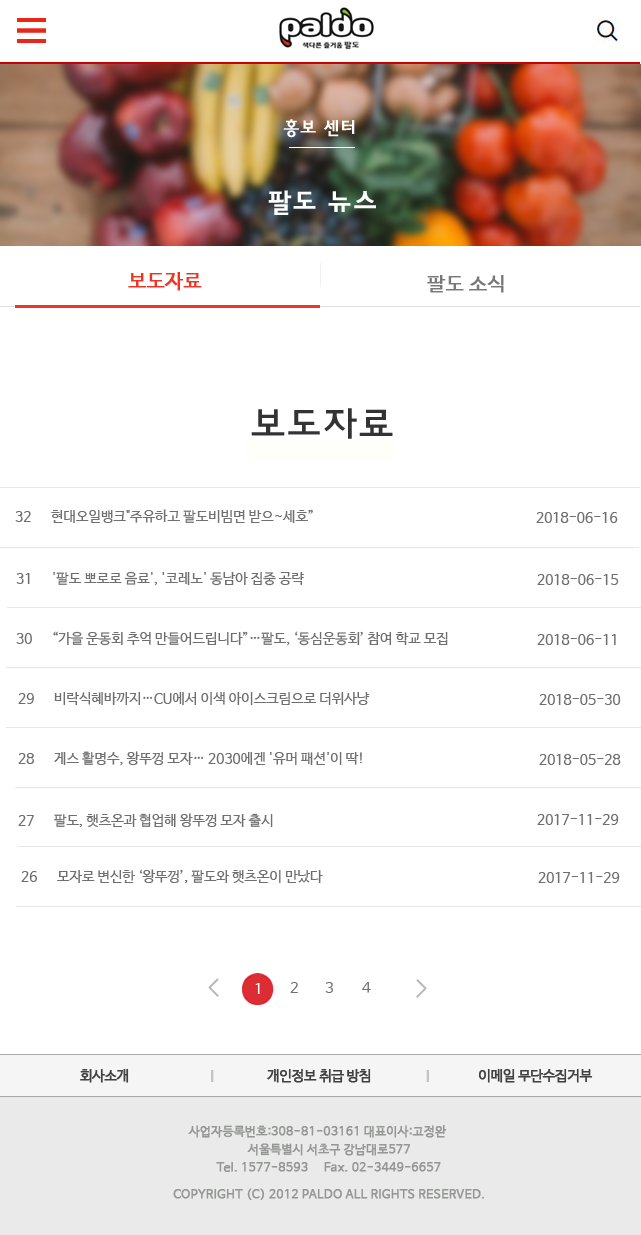
<style>
.page{position:relative;width:641px;height:1235px;background:#ffffff}
.page>*{position:absolute;margin:0}
.t1{font:18px "HaanYGodic23";color:#ffffff;font-weight:bold}
.t2{font:27px "HaanYGodic23";color:#ffffff;font-weight:bold}
.t3{font:20px "NanumBarunGothic";color:#ee3524;font-weight:bold}
.t4{font:20px "NanumBarunGothic";color:#787878;font-weight:bold}
.t5{font:40px "HaanYGodic23";color:#333333}
.t6{font:14px "NanumBarunGothic";color:#6f6f6f}
.t7{font:15px "NanumBarunGothic";color:#ffffff}
.t8{font:15px "NanumBarunGothic";color:#6f6f6f}
.t9{font:14px "NanumBarunGothic";letter-spacing:-0.05em;color:#414141;font-weight:bold}
.t10{font:12px/9px "NanumBarunGothic";letter-spacing:0.005em;color:#949794;font-weight:bold}
</style>
<div class="page">
<p class="t1" style="left:283px;top:119px;width:72px;height:19px">홍보 센터</p>
<p class="t2" style="left:268px;top:190px;width:108px;height:25px">팔도 뉴스</p>
<p class="t3" style="left:128px;top:272px;width:74px;height:19px">보도자료</p>
<p class="t4" style="left:427px;top:275px;width:77px;height:18px">팔도 소식</p>
<p class="t5" style="left:251px;top:408px;width:142px;height:31px">보도자료</p>
<p class="t6" style="left:15px;top:509px;width:298px;height:14px">32 현대오일뱅크"주유하고 팔도비빔면 받으~세호”</p>
<p class="t6" style="left:536px;top:512px;width:82px;height:11px">2018-06-16</p>
<p class="t6" style="left:16px;top:571px;width:288px;height:15px">31 '팔도 뽀로로 음료', '코레노' 동남아 집중 공략</p>
<p class="t6" style="left:537px;top:574px;width:82px;height:11px">2018-06-15</p>
<p class="t6" style="left:16px;top:631px;width:432px;height:15px">30 “가을 운동회 추억 만들어드립니다”…팔도, ‘동심운동회’ 참여 학교 모집</p>
<p class="t6" style="left:537px;top:634px;width:79px;height:11px">2018-06-11</p>
<p class="t6" style="left:18px;top:692px;width:352px;height:13px">29 비락식혜바까지…CU에서 이색 아이스크림으로 더위사냥</p>
<p class="t6" style="left:539px;top:694px;width:82px;height:11px">2018-05-30</p>
<p class="t6" style="left:18px;top:751px;width:344px;height:15px">28 게스 활명수, 왕뚜껑 모자… 2030에겐 '유머 패션'이 딱!</p>
<p class="t6" style="left:539px;top:754px;width:82px;height:11px">2018-05-28</p>
<p class="t6" style="left:18px;top:813px;width:255px;height:15px">27 팔도, 햇츠온과 협업해 왕뚜껑 모자 출시</p>
<p class="t6" style="left:537px;top:814px;width:82px;height:11px">2017-11-29</p>
<p class="t6" style="left:21px;top:869px;width:302px;height:15px">26 모자로 변신한 ‘왕뚜껑’, 팔도와 햇츠온이 만났다</p>
<p class="t6" style="left:538px;top:872px;width:82px;height:11px">2017-11-29</p>
<p class="t7" style="left:255px;top:983px;width:5px;height:11px">1</p>
<p class="t8" style="left:290px;top:982px;width:8px;height:11px">2</p>
<p class="t8" style="left:325px;top:982px;width:8px;height:11px">3</p>
<p class="t8" style="left:362px;top:982px;width:9px;height:11px">4</p>
<p class="t9" style="left:80px;top:1069px;width:49px;height:14px">회사소개</p>
<p class="t9" style="left:267px;top:1069px;width:104px;height:14px">개인정보 취급 방침</p>
<p class="t9" style="left:478px;top:1069px;width:115px;height:14px">이메일 무단수집거부</p>
<p class="t10" style="left:173px;top:1125px;width:311px;height:75px">사업자등록번호:308-81-03161 대표이사:고정완<br><br>                                  서울특별시 서초구 강남대로577 <br> <br>                        Tel. 1577-8593     Fax. 02-3449-6657<br>   <br><br>          COPYRIGHT (C) 2012 PALDO ALL RIGHTS RESERVED.</p>
</div>
